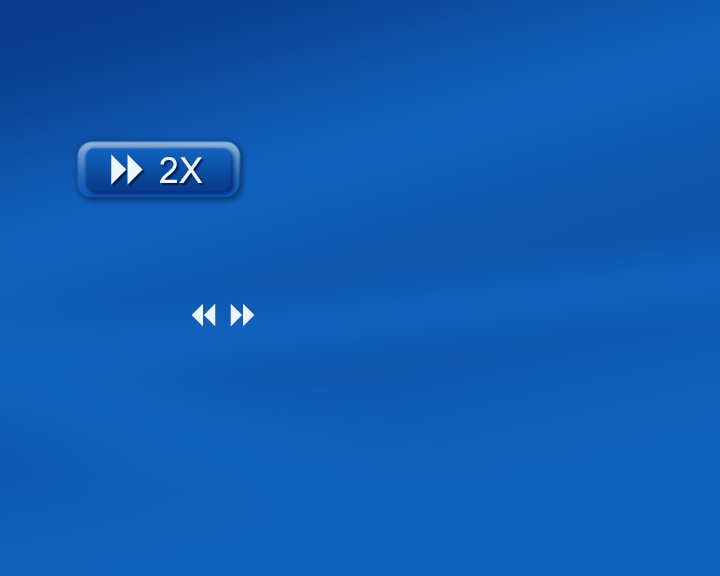
<style>
.page{position:relative;width:720px;height:576px}
.page>*{position:absolute;margin:0}
.t1{font:36px "ArialMT";color:#edf5ff}
.t2{font:48px "Webdings";color:#edf5ff}
</style>
<div class="page">
<p class="t1" style="left:111px;top:154px;width:92px;height:31px"><span class="t2">8</span> 2X</p>
</div>
